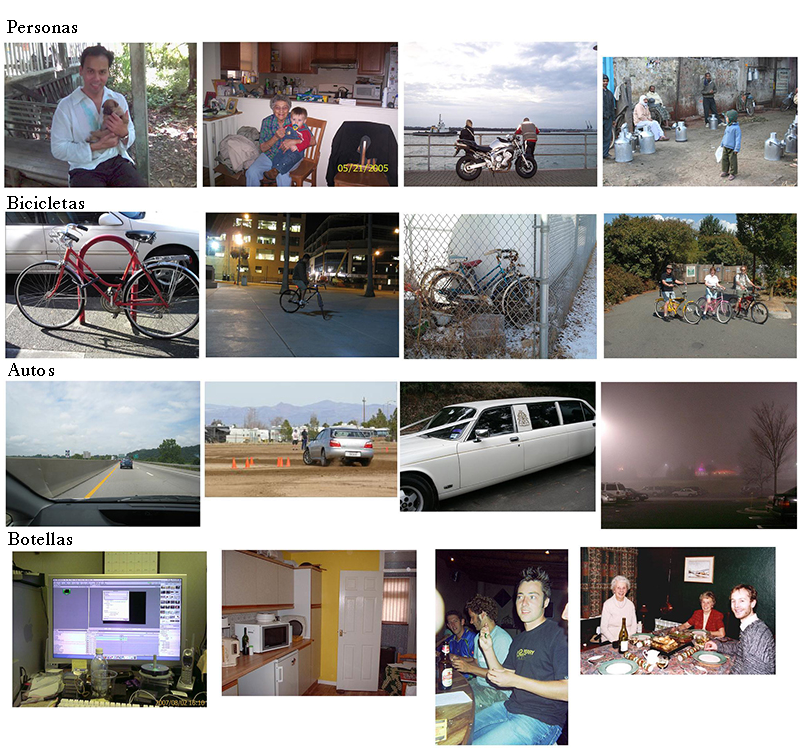
<style>
.page{position:relative;width:800px;height:748px;background:#ffffff}
.page>*{position:absolute;margin:0}
.t1{font:18px "Times-Roman";letter-spacing:0.06em;color:#000000}
</style>
<div class="page">
<p class="t1" style="left:7px;top:20px;width:70px;height:13px">Personas</p>
<p class="t1" style="left:7px;top:196px;width:77px;height:13px">Bicicletas</p>
<p class="t1" style="left:8px;top:363px;width:46px;height:13px">Autos</p>
<p class="t1" style="left:8px;top:532px;width:64px;height:13px">Botellas</p>
</div>
